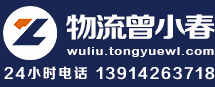
<style>
.page{position:relative;width:215px;height:87px;background:#192653}
.page>*{position:absolute;margin:0}
.t1{font:27.6px "FZZCHJW--GB1-0";letter-spacing:-0.1em;color:#fefefe;scale:1.19 1}
.t2{font:11.2px "ArialRoundedMTBold";letter-spacing:0.06em;color:#ffffff;scale:1.16 1}
.t3{font:13.9px "FZZCHJW--GB1-0";letter-spacing:0.13em;color:#fefefe}
</style>
<div class="page">
<p class="t1" style="left:66px;top:14px;width:149px;height:26px">物流曾小春</p>
<p class="t2" style="left:67px;top:47px;width:147px;height:10px">wuliu.tongyuewl.com</p>
<p class="t3" style="left:4px;top:66px;width:211px;height:14px">24小时电话 13914263718</p>
</div>
